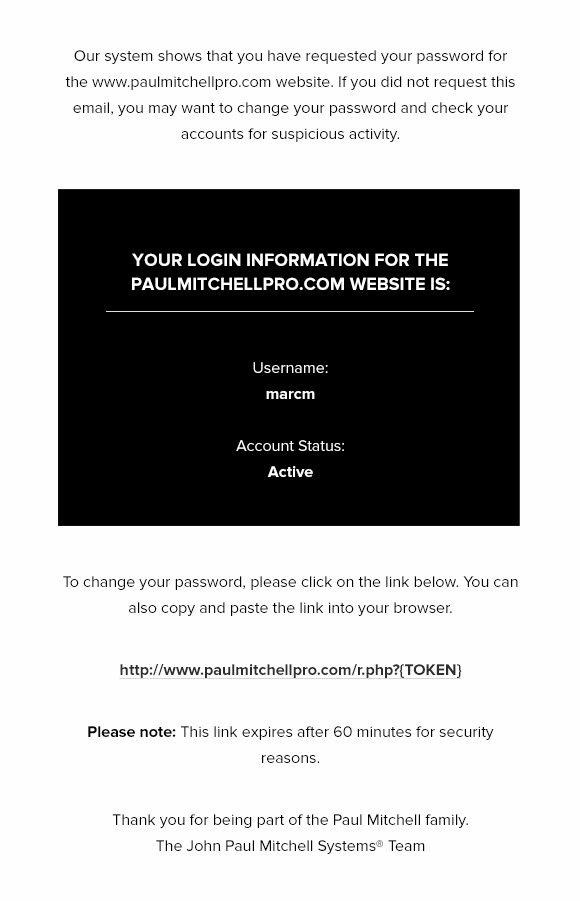
<style>
.page{position:relative;width:580px;height:901px;background:#fffefe}
.page>*{position:absolute;margin:0}
.t1{font:16px/26px "ProximaNova-Regular";color:#000000}
.t2{font:18px/24px "ProximaNova-Bold";color:#ffffff;text-transform:uppercase}
.t3{font:16px/26px "ProximaNova-Regular";color:#fefefe}
.t4{font:16px/26px "ProximaNova-Bold";color:#fefefe}
.t5{font:16px "ProximaNova-Bold";color:#2e2e2e;text-decoration:underline}
.t6{font:16px/26px "ProximaNova-Bold";color:#000000}
</style>
<div class="page">
<p class="t1" style="left:65px;top:50px;width:450px;height:92px;text-align:center">Our system shows that you have requested your password for the www.paulmitchellpro.com website. If you did not request this email, you may want to change your password and check your accounts for suspicious activity.</p>
<p class="t2" style="left:132px;top:253px;width:318px;height:37px;text-align:center">your login information for the paulmitchellpro.com website is:</p>
<p class="t3" style="left:236px;top:362px;width:108px;height:115px;text-align:center">Username:<br><span class="t4">marcm<br></span><br>Account Status:<br><span class="t4">Active</span></p>
<p class="t1" style="left:63px;top:576px;width:455px;height:40px;text-align:center">To change your password, please click on the link below. You can also copy and paste the link into your browser.</p>
<p class="t5" style="left:119px;top:664px;width:343px;height:15px">http://www.paulmitchellpro.com/r.php?{TOKEN}</p>
<p class="t1" style="left:88px;top:726px;width:406px;height:37px;text-align:center"><span class="t6">Please note: </span>This link expires after 60 minutes for security reasons.</p>
<p class="t1" style="left:112px;top:814px;width:356px;height:40px;text-align:center">Thank you for being part of the Paul Mitchell family. <br>The John Paul Mitchell Systems® Team</p>
</div>
